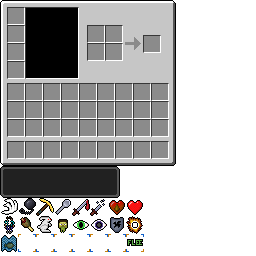
<style>
.page{position:relative;width:256px;height:256px;background:#ffffff}
.page>*{position:absolute;margin:0}
.t1{font:7px "Small Fonts";letter-spacing:-0.05em;color:#5bad46}
</style>
<div class="page">
<p class="t1" style="left:128px;top:240px;width:14px;height:5px">FLEE</p>
</div>
